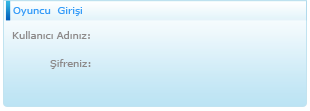
<style>
.page{position:relative;width:310px;height:111px}
.page>*{position:absolute;margin:0}
.t1{font:10px "Verdana";letter-spacing:-0.005em;color:#359cf8}
.t2{font:10px "Verdana";letter-spacing:-0.005em;color:#8d8a8a}
</style>
<div class="page">
<p class="t1" style="left:13px;top:7px;width:69px;height:9px">Oyuncu  Girişi</p>
<p class="t2" style="left:12px;top:31px;width:78px;height:8px">Kullanıcı Adınız:</p>
<p class="t2" style="left:50px;top:59px;width:41px;height:10px">Şifreniz:</p>
</div>
